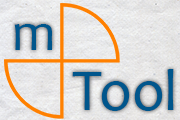
<style>
.page{position:relative;width:180px;height:120px}
.page>*{position:absolute;margin:0}
.t1{font:53.3px "Candara";color:#00568c}
.t2{font:58.7px "Candara";color:#00568c}
</style>
<div class="page">
<p class="t1" style="left:14px;top:24px;width:38px;height:26px">m</p>
<p class="t2" style="left:72px;top:69px;width:102px;height:42px">Tool</p>
</div>
